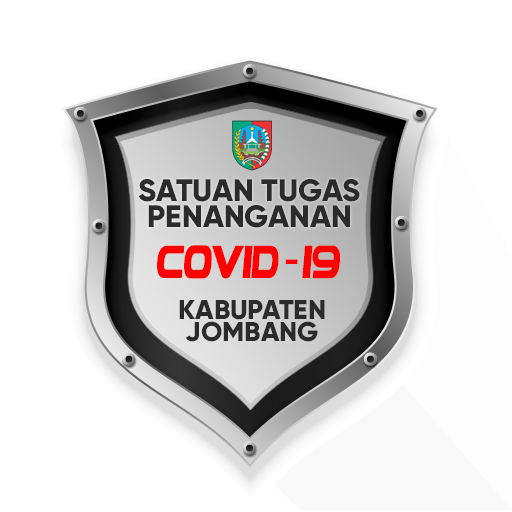
<style>
.page{position:relative;width:512px;height:512px;background:#ffffff}
.page>*{position:absolute;margin:0}
.t1{font:30.9px "Gilroy-ExtraBold";color:#2b2b2b}
.t2{font:47.3px "!PEPSI!";color:#ff0000;scale:0.79 1}
.t3{font:30.9px "Gilroy-ExtraBold";color:#ff0000}
.t4{font:27.1px "Gilroy-ExtraBold";color:#2b2b2b}
</style>
<div class="page">
<p class="t1" style="left:138px;top:179px;width:222px;height:23px">SATUAN TUGAS</p>
<p class="t1" style="left:148px;top:205px;width:202px;height:23px">PENANGANAN</p>
<p class="t2" style="left:157px;top:245px;width:183px;height:34px">COVID  -19</p>
<p class="t3" style="left:285px;top:259px;width:13px;height:5px">-</p>
<p class="t4" style="left:179px;top:300px;width:146px;height:20px">KABUPATEN</p>
<p class="t4" style="left:185px;top:321px;width:133px;height:21px">JOMBANG</p>
</div>
